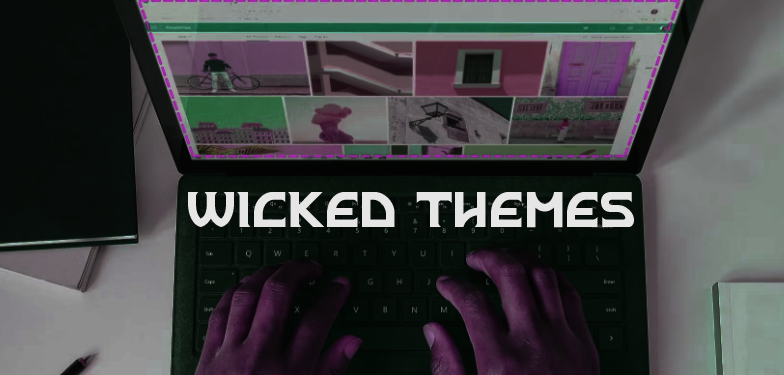
<style>
.page{position:relative;width:784px;height:375px}
.page>*{position:absolute;margin:0}
.t1{font:50px "OldWhisky-OldWhiskybase";color:#e7e6e6}
</style>
<div class="page">
<p class="t1" style="left:188px;top:192px;width:446px;height:36px">Wicked Themes</p>
</div>
